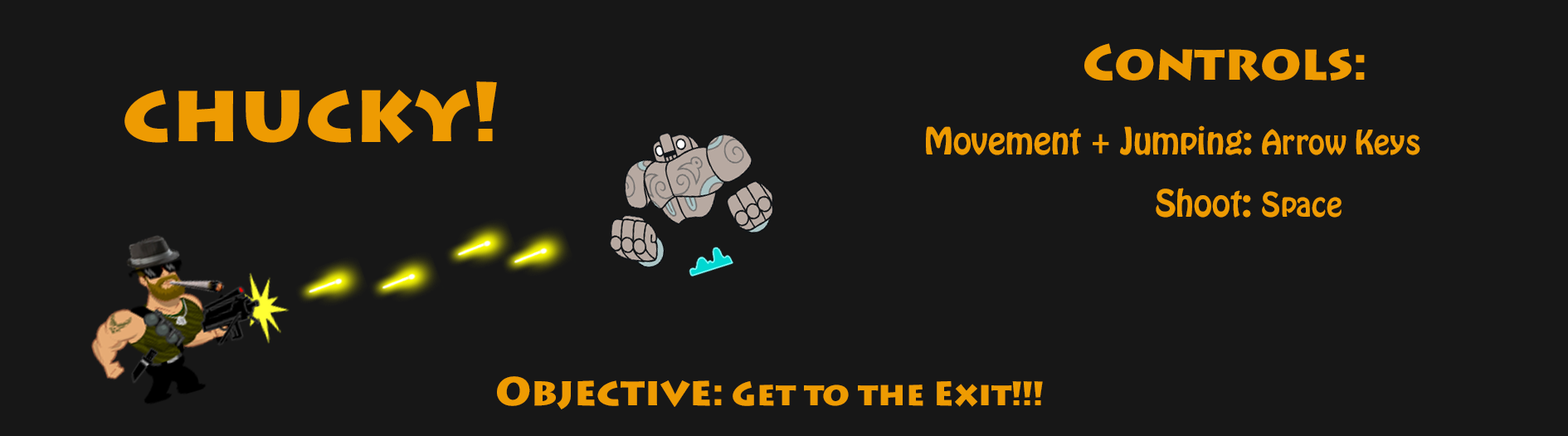
<style>
.page{position:relative;width:1568px;height:436px;background:#171717}
.page>*{position:absolute;margin:0}
.t1{font:49.8px "LithosPro-Black";color:#ee9b02}
.t2{font:83px "LithosPro-Black";color:#ee9b02}
.t3{font:33.2px "HoboStd";color:#ee9b02}
.t4{font:29.9px "HoboStd";color:#ee9b02}
.t5{font:33.2px "LithosPro-Black";color:#ee9b02}
.t6{font:39.8px "LithosPro-Black";color:#ee9b02}
</style>
<div class="page">
<p class="t1" style="left:1084px;top:43px;width:281px;height:38px">Controls:</p>
<p class="t2" style="left:124px;top:81px;width:373px;height:63px">chucky!</p>
<p class="t3" style="left:926px;top:125px;width:494px;height:30px">Movement + Jumping:<span class="t4"> Arrow Keys</span></p>
<p class="t3" style="left:1156px;top:187px;width:186px;height:30px">Shoot: <span class="t4">Space</span></p>
<p class="t5" style="left:497px;top:376px;width:546px;height:33px"><span class="t6">Objective: </span>Get to the Exit!!!</p>
</div>
